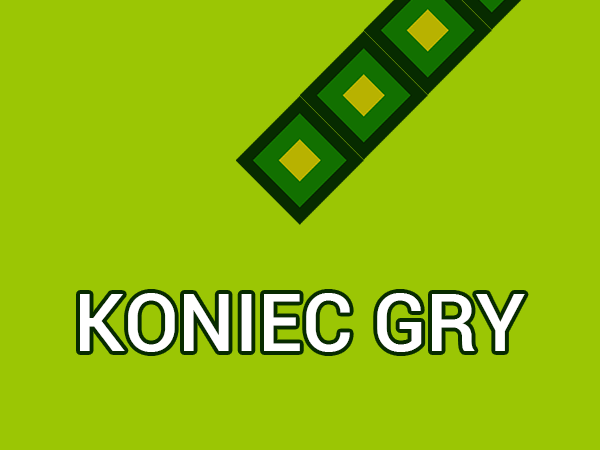
<style>
.page{position:relative;width:600px;height:450px;background:#9bc604}
.page>*{position:absolute;margin:0}
.t1{font:80px "Roboto-Medium";color:#ffffff}
</style>
<div class="page">
<p class="t1" style="left:80px;top:293px;width:445px;height:59px">KONIEC GRY</p>
</div>
